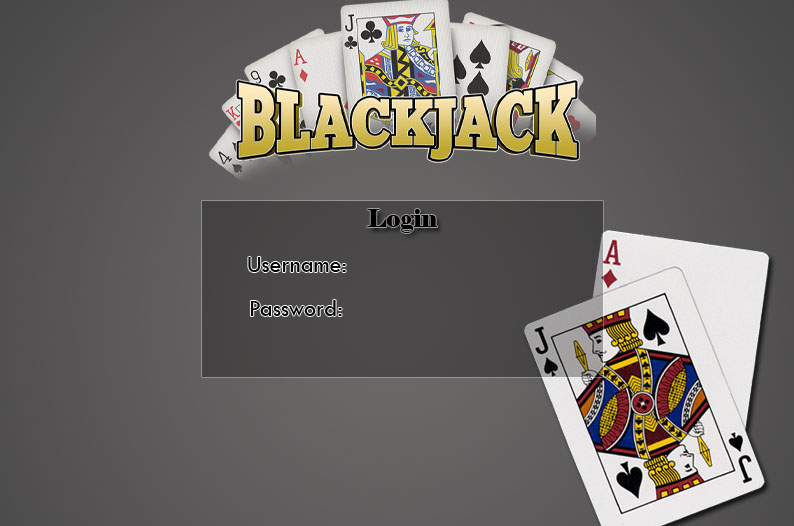
<style>
.page{position:relative;width:794px;height:526px}
.page>*{position:absolute;margin:0}
.t1{font:24px "Elephant-Regular";color:#000000}
.t2{font:24px "TwCenMT-Regular";color:#000000}
</style>
<div class="page">
<p class="t1" style="left:367px;top:209px;width:71px;height:24px">Login</p>
<p class="t2" style="left:248px;top:257px;width:98px;height:15px">Username:</p>
<p class="t2" style="left:250px;top:300px;width:92px;height:16px">Password:</p>
</div>
